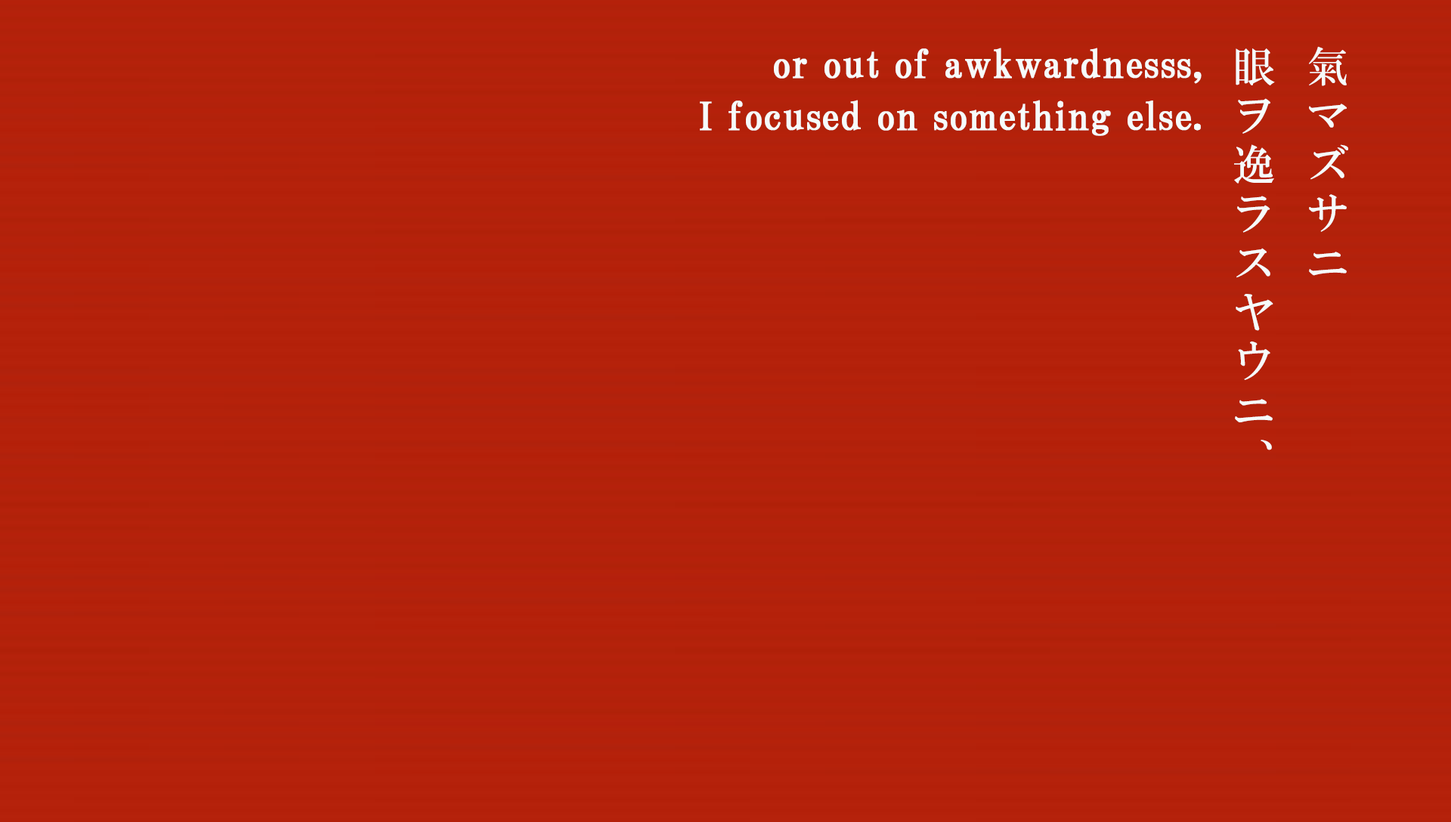
<style>
.page{position:relative;width:1451px;height:822px}
.page>*{position:absolute;margin:0}
.t1{font:38.3px/52.1px "HGPMinchoB";letter-spacing:0.01em;color:#f6fbfb;font-weight:bold}
.t2{font:42.3px/74px "HGMinchoB";letter-spacing:0.16em;color:#f6fbfb}
</style>
<div class="page">
<p class="t1" style="left:700px;top:48px;width:501px;height:88px;text-align:right">or out of awkwardnesss,<br>I focused on something else.</p>
<p class="t2" style="left:1234px;top:46px;width:114px;height:404px">氣マズサニ<br>眼ヲ逸ラスヤウニ、</p>
</div>
